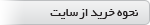
<style>
.page{position:relative;width:150px;height:25px}
.page>*{position:absolute;margin:0}
.t1{font:13.2px "BYekan";color:#231f20}
</style>
<div class="page">
<p class="t1" style="left:50px;top:9px;width:88px;height:10px">نحوه خرید از سایت</p>
</div>
